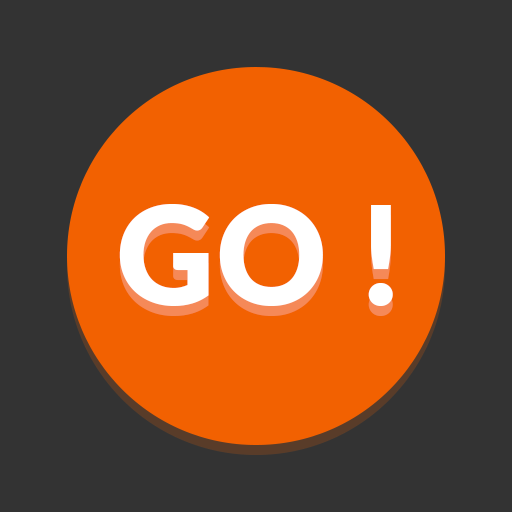
<style>
.page{position:relative;width:512px;height:512px;background:#333333}
.page>*{position:absolute;margin:0}
.t1{font:136px "Lato-Black";letter-spacing:0.01em;color:#ffffff}
</style>
<div class="page">
<p class="t1" style="left:119px;top:204px;width:274px;height:102px">GO !</p>
<p class="t1" style="left:119px;top:214px;width:274px;height:102px;opacity:0.2">GO !</p>
</div>
